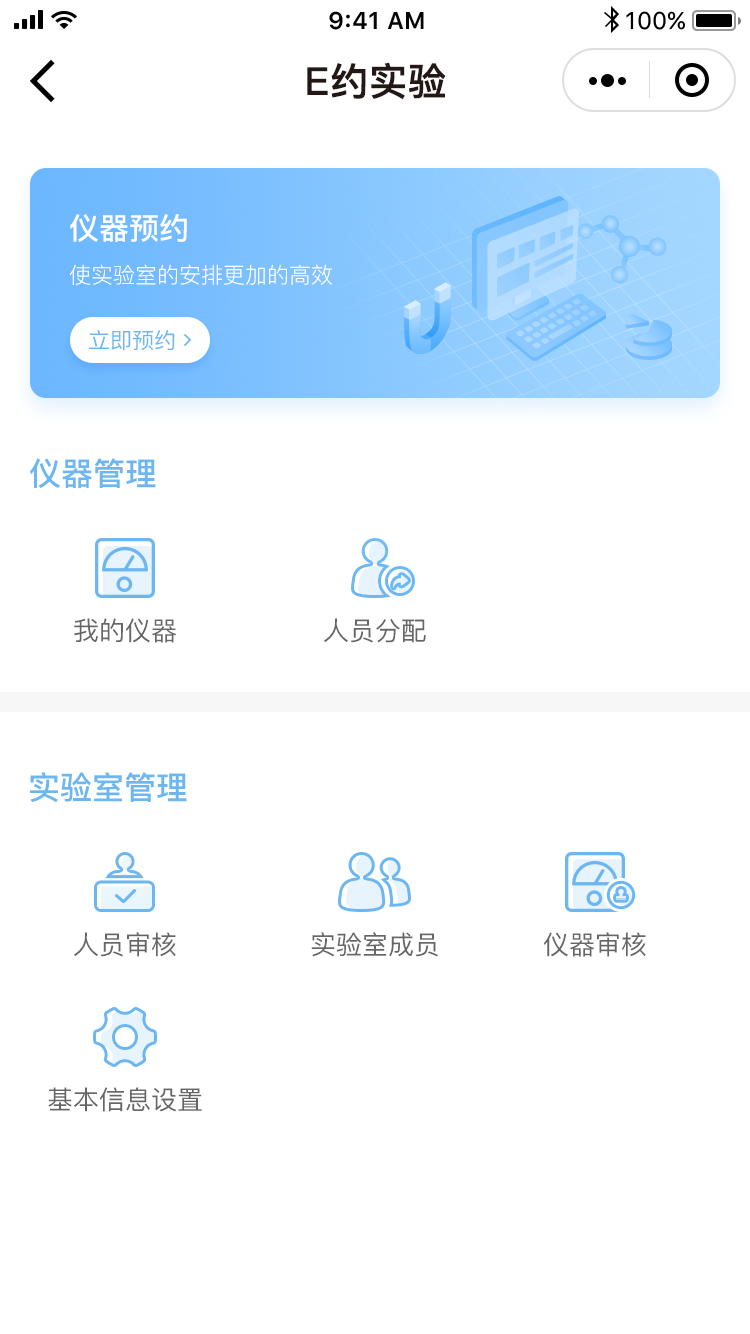
<style>
.page{position:relative;width:750px;height:1334px;background:#ffffff}
.page>*{position:absolute;margin:0}
.t1{font:38px "PingFang-SC-Bold";color:#231815;font-weight:bold}
.t2{font:30px "PingFang-SC-Bold";color:#ffffff}
.t3{font:22px "PingFang-SC-Regular";color:#ffffff}
.t4{font:22px "PingFang-SC-Medium";color:#6cb7f1}
.t5{font:32px "PingFang-SC-Bold";color:#6cb7f1}
.t6{font:26px "PingFang-SC-Medium";color:#666666}
</style>
<div class="page">
<p class="t1" style="left:307px;top:62px;width:139px;height:38px">E约实验</p>
<p class="t2" style="left:70px;top:214px;width:117px;height:28px">仪器预约</p>
<p class="t3" style="left:69px;top:264px;width:263px;height:21px">使实验室的安排更加的高效</p>
<p class="t4" style="left:89px;top:330px;width:86px;height:21px">立即预约</p>
<p class="t5" style="left:30px;top:458px;width:126px;height:31px">仪器管理</p>
<p class="t6" style="left:74px;top:618px;width:102px;height:25px">我的仪器</p>
<p class="t6" style="left:324px;top:618px;width:102px;height:25px">人员分配</p>
<p class="t5" style="left:30px;top:772px;width:157px;height:31px">实验室管理</p>
<p class="t6" style="left:74px;top:932px;width:102px;height:25px">人员审核</p>
<p class="t6" style="left:311px;top:932px;width:127px;height:25px">实验室成员</p>
<p class="t6" style="left:544px;top:932px;width:102px;height:25px">仪器审核</p>
<p class="t6" style="left:48px;top:1087px;width:154px;height:25px">基本信息设置</p>
</div>
